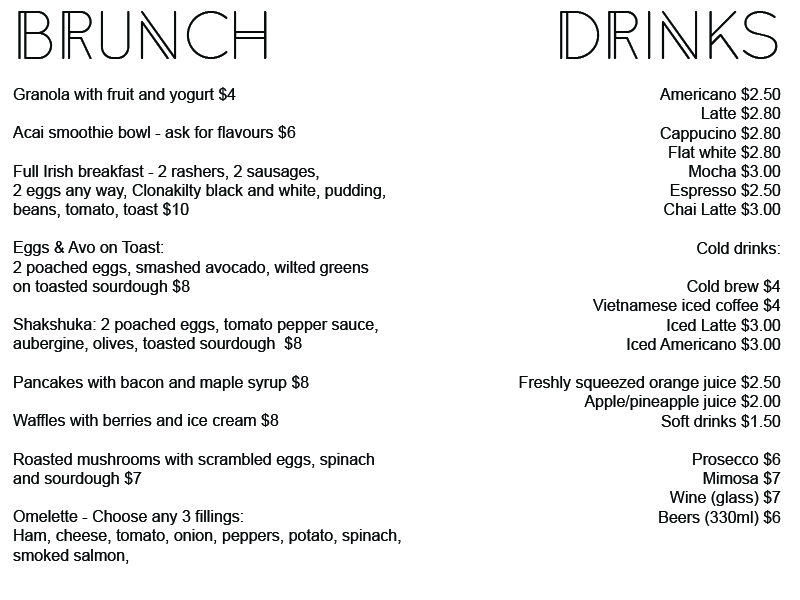
<style>
.page{position:relative;width:800px;height:600px;background:#ffffff}
.page>*{position:absolute;margin:0}
.t1{font:16px "ArialMT";color:#070a0a}
.t2{font:60px "Anders";color:#070a0a}
.t3{font:16px "Anders";color:#070a0a}
</style>
<div class="page">
<p class="t1" style="left:13px;top:11px;width:388px;height:553px"><span class="t2">Brunch<br><br></span>Granola with fruit and yogurt $4<br><br>Acai smoothie bowl - ask for flavours $6<br><br>Full Irish breakfast - 2 rashers, 2 sausages, <br>2 eggs any way, Clonakilty black and white, pudding, <br>beans, tomato, toast $10<br><br>Eggs &amp; Avo on Toast:<br>2 poached eggs, smashed avocado, wilted greens <br>on toasted sourdough $8<br><br>Shakshuka: 2 poached eggs, tomato pepper sauce, <br>aubergine, olives, toasted sourdough  $8<br><br>Pancakes with bacon and maple syrup $8<br><br>Waffles with berries and ice cream $8<br><br>Roasted mushrooms with scrambled eggs, spinach<br>and sourdough $7<br><br>Omelette - Choose any 3 fillings:<br>Ham, cheese, tomato, onion, peppers, potato, spinach,<br>smoked salmon,</p>
<p class="t1" style="left:519px;top:11px;width:262px;height:515px"><span class="t3"><br><br><br></span><span class="t2">DRINKS<br><br></span>Americano $2.50<br>Latte $2.80<br>Cappucino $2.80<br>Flat white $2.80<br>Mocha $3.00<br>Espresso $2.50<br>Chai Latte $3.00<br><br>Cold drinks:<br><br>Cold brew $4<br>Vietnamese iced coffee $4<br>Iced Latte $3.00<br>Iced Americano $3.00<br><br>Freshly squeezed orange juice $2.50<br>Apple/pineapple juice $2.00<br>Soft drinks $1.50<br><br>Prosecco $6<br>Mimosa $7<br>Wine (glass) $7<br>Beers (330ml) $6</p>
</div>
